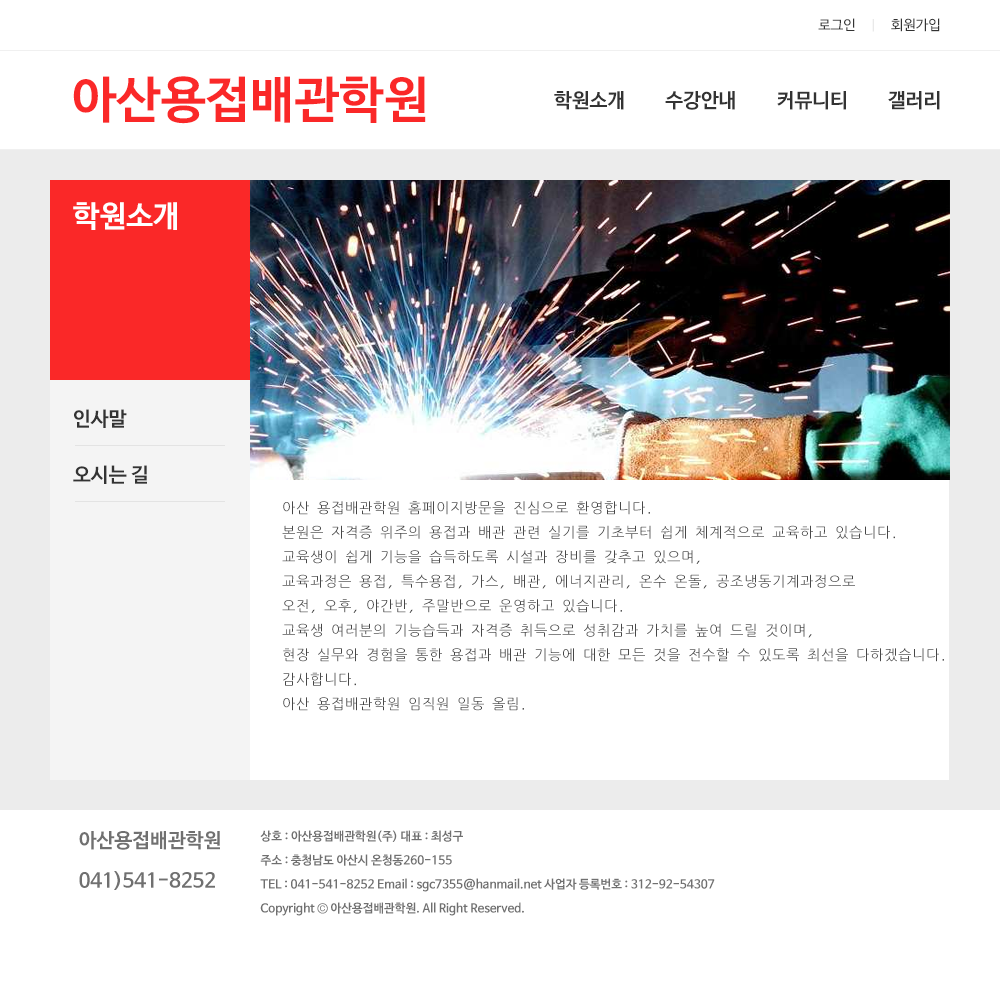
<style>
.page{position:relative;width:1000px;height:1000px;background:#ffffff}
.page>*{position:absolute;margin:0}
.t1{font:14px "NanumBarunGothicOTF";color:#333333}
.t2{font:50px "NanumBarunGothicOTFBold";color:#fa2828}
.t3{font:20px "NanumBarunGothicOTFBold";color:#333333}
.t4{font:30px "NanumBarunGothicOTFBold";color:#ffffff}
.t5{font:14px "NanumGothicCoding";color:#474747}
.t6{font:20px/40px "NanumBarunGothicOTFBold";color:#707070}
.t7{font:12px/24px "NanumBarunGothicOTFBold";color:#707070}
</style>
<div class="page">
<p class="t1" style="left:818px;top:18px;width:122px;height:14px">로그인　 　회원가입</p>
<p class="t2" style="left:73px;top:76px;width:353px;height:48px">아산용접배관학원</p>
<p class="t3" style="left:554px;top:91px;width:386px;height:19px">학원소개　　수강안내　　커뮤니티　　갤러리</p>
<p class="t4" style="left:73px;top:202px;width:104px;height:28px">학원소개</p>
<p class="t3" style="left:74px;top:409px;width:53px;height:19px">인사말</p>
<p class="t3" style="left:73px;top:465px;width:74px;height:19px">오시는 길</p>
<p class="t5" style="left:282px;top:501px;width:662px;height:210px">아산 용접배관학원 홈페이지방문을 진심으로 환영합니다.<br>본원은 자격증 위주의 용접과 배관 관련 실기를 기초부터 쉽게 체계적으로 교육하고 있습니다.<br>교육생이 쉽게 기능을 습득하도록 시설과 장비를 갖추고 있으며,<br>교육과정은 용접, 특수용접, 가스, 배관, 에너지관리, 온수 온돌, 공조냉동기계과정으로<br>오전, 오후, 야간반, 주말반으로 운영하고 있습니다.<br>교육생 여러분의 기능습득과 자격증 취득으로 성취감과 가치를 높여 드릴 것이며,<br>현장 실무와 경험을 통한 용접과 배관 기능에 대한 모든 것을 전수할 수 있도록 최선을 다하겠습니다.<br>감사합니다.<br>아산 용접배관학원 임직원 일동 올림.</p>
<p class="t6" style="left:79px;top:831px;width:141px;height:59px">아산용접배관학원<br>041)541-8252</p>
<p class="t7" style="left:260px;top:830px;width:455px;height:86px">상호 : 아산용접배관학원(주) 대표 : 최성구<br>주소 : 충청남도 아산시 온청동260-155<br>TEL : 041-541-8252 Email : sgc7355@hanmail.net 사업자 등록번호 : 312-92-54307<br>Copyright © 아산용접배관학원. All Right Reserved.</p>
</div>
